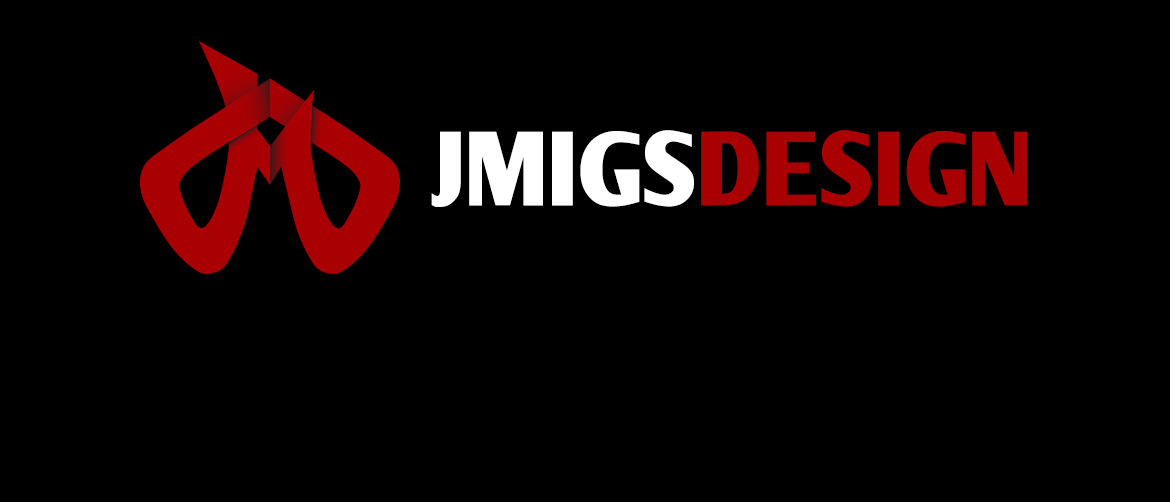
<style>
.page{position:relative;width:1170px;height:502px;background:#000000}
.page>*{position:absolute;margin:0}
.t1{font:103px "ArmWrestler-Bold";color:#a90003}
.t2{font:103px "ArmWrestler-Bold";color:#ffffff}
</style>
<div class="page">
<p class="t1" style="left:431px;top:130px;width:596px;height:77px"><span class="t2">JMIGS</span>DESIGN</p>
</div>
